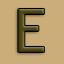
<style>
.page{position:relative;width:64px;height:64px;background:#cbad7a}
.page>*{position:absolute;margin:0}
.t1{font:60px "TrebuchetMS"}
</style>
<div class="page">
<p class="t1" style="left:18px;top:9px;width:26px;height:43px">E</p>
</div>
